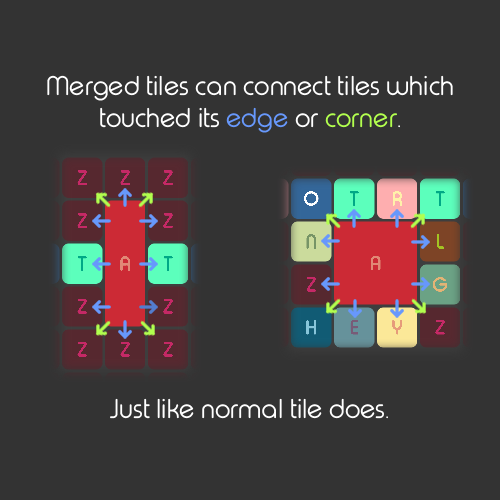
<style>
.page{position:relative;width:500px;height:500px;background:#333333}
.page>*{position:absolute;margin:0}
.t1{font:27px "TypoRoundLightDemo";color:#ffffff}
.t2{font:27px "TypoRoundLightDemo";color:#6798fc}
.t3{font:27px "TypoRoundLightDemo";color:#b2ff4e}
</style>
<div class="page">
<p class="t1" style="left:47px;top:75px;width:406px;height:58px;text-align:center">Merged tiles can connect tiles which<br>touched its <span class="t2">edge</span> or <span class="t3">corner</span>.</p>
<p class="t1" style="left:110px;top:398px;width:278px;height:21px">Just like normal tile does.</p>
</div>
